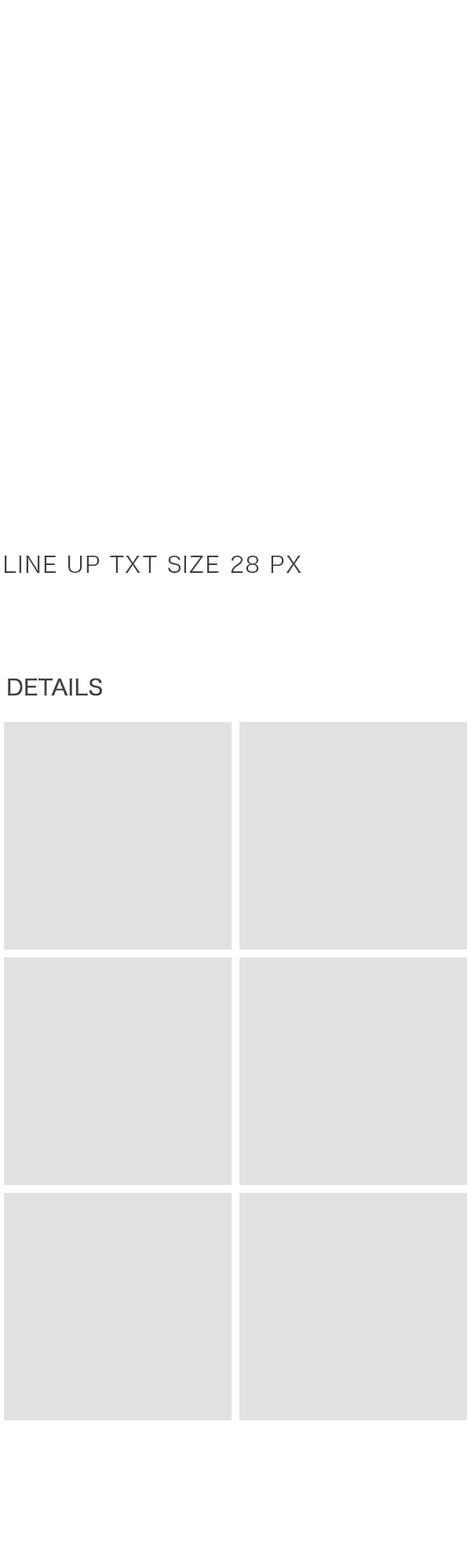
<style>
.page{position:relative;width:471px;height:1568px;background:#ffffff}
.page>*{position:absolute;margin:0}
.t1{font:22px "HiraKakuPro-W3";letter-spacing:0.06em;color:#3e3e3e}
.t2{font:22px "HiraKakuPro-W3";color:#3e3e3e;font-weight:bold}
</style>
<div class="page">
<p class="t1" style="left:4px;top:556px;width:297px;height:18px">LINE UP TXT SIZE 28 PX</p>
<p class="t2" style="left:8px;top:678px;width:94px;height:18px">DETAILS</p>
</div>
